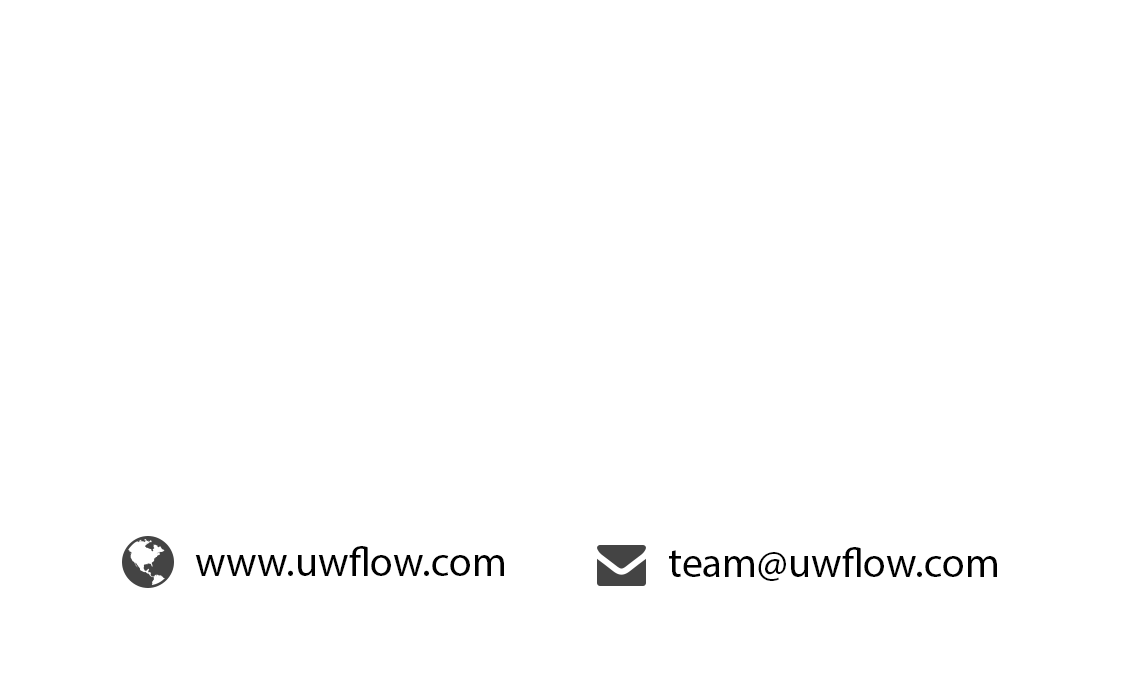
<style>
.page{position:relative;width:1125px;height:675px;background:#ffffff}
.page>*{position:absolute;margin:0}
.t1{font:41.7px "MyriadPro-Regular";color:#000000}
</style>
<div class="page">
<p class="t1" style="left:195px;top:546px;width:309px;height:30px">www.uwflow.com</p>
<p class="t1" style="left:669px;top:547px;width:328px;height:34px">team@uwflow.com</p>
</div>
